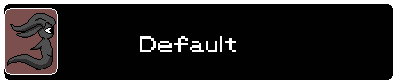
<style>
.page{position:relative;width:397px;height:84px;background:#010101}
.page>*{position:absolute;margin:0}
.t1{font:18px "Pokémon-GB-Font-[Extended]";color:#ffffff}
</style>
<div class="page">
<p class="t1" style="left:140px;top:36px;width:96px;height:16px">Default</p>
</div>
